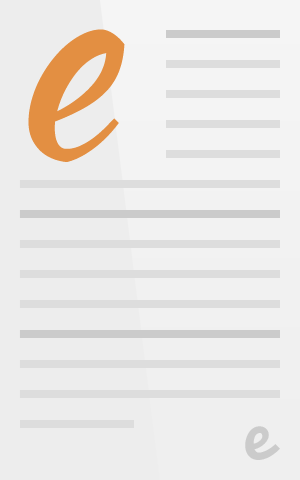
<style>
.page{position:relative;width:300px;height:480px;background:#ededed}
.page>*{position:absolute;margin:0}
.t1{font:260px "KaushanScript-Regular";color:#e38f42}
</style>
<div class="page">
<p class="t1" style="left:28px;top:29px;width:97px;height:133px">e</p>
</div>
